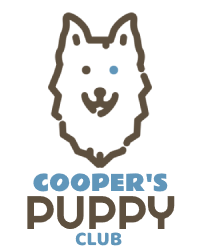
<style>
.page{position:relative;width:200px;height:250px;background:#ffffff}
.page>*{position:absolute;margin:0}
.t1{font:22px "RammettoOne-Regular";color:#6096ba}
.t2{font:47px "Righteous-Regular";color:#5e503f}
.t3{font:20px "Baloo-Regular";color:#6096ba}
</style>
<div class="page">
<p class="t1" style="left:33px;top:173px;width:135px;height:19px">COOPER'S</p>
<p class="t2" style="left:27px;top:196px;width:148px;height:33px">PUPPY</p>
<p class="t3" style="left:75px;top:232px;width:47px;height:14px">CLUB</p>
</div>
